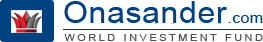
<style>
.page{position:relative;width:263px;height:42px;background:#ffffff}
.page>*{position:absolute;margin:0}
.t1{font:30px "ArialMT";letter-spacing:0.03em;color:#004281;scale:1.05 1}
.t2{font:15px "ArialMT";letter-spacing:0.03em;color:#004281;scale:1.05 1}
.t3{font:10px "ArialMT";letter-spacing:0.269em;color:#515151;scale:1.05 1}
</style>
<div class="page">
<p class="t1" style="left:64px;top:1px;width:199px;height:22px">Onasander<span class="t2">.com</span></p>
<p class="t3" style="left:64px;top:34px;width:199px;height:7px">WORLD INVESTMENT FUND</p>
</div>
